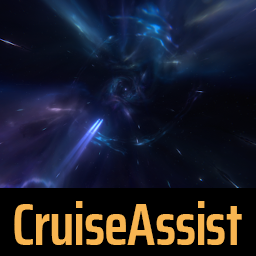
<style>
.page{position:relative;width:256px;height:256px}
.page>*{position:absolute;margin:0}
.t1{font:60px "SairaCondensed-SemiBold";color:#f8b551;scale:0.95 1}
</style>
<div class="page">
<p class="t1" style="left:14px;top:201px;width:228px;height:44px">CruiseAssist</p>
</div>
